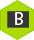
<style>
.page{position:relative;width:34px;height:40px;background:#acdb00}
.page>*{position:absolute;margin:0}
.t1{font:18px "MyriadPro-Regular";color:#ffffff}
</style>
<div class="page">
<p class="t1" style="left:15px;top:12px;width:8px;height:13px">B</p>
</div>
